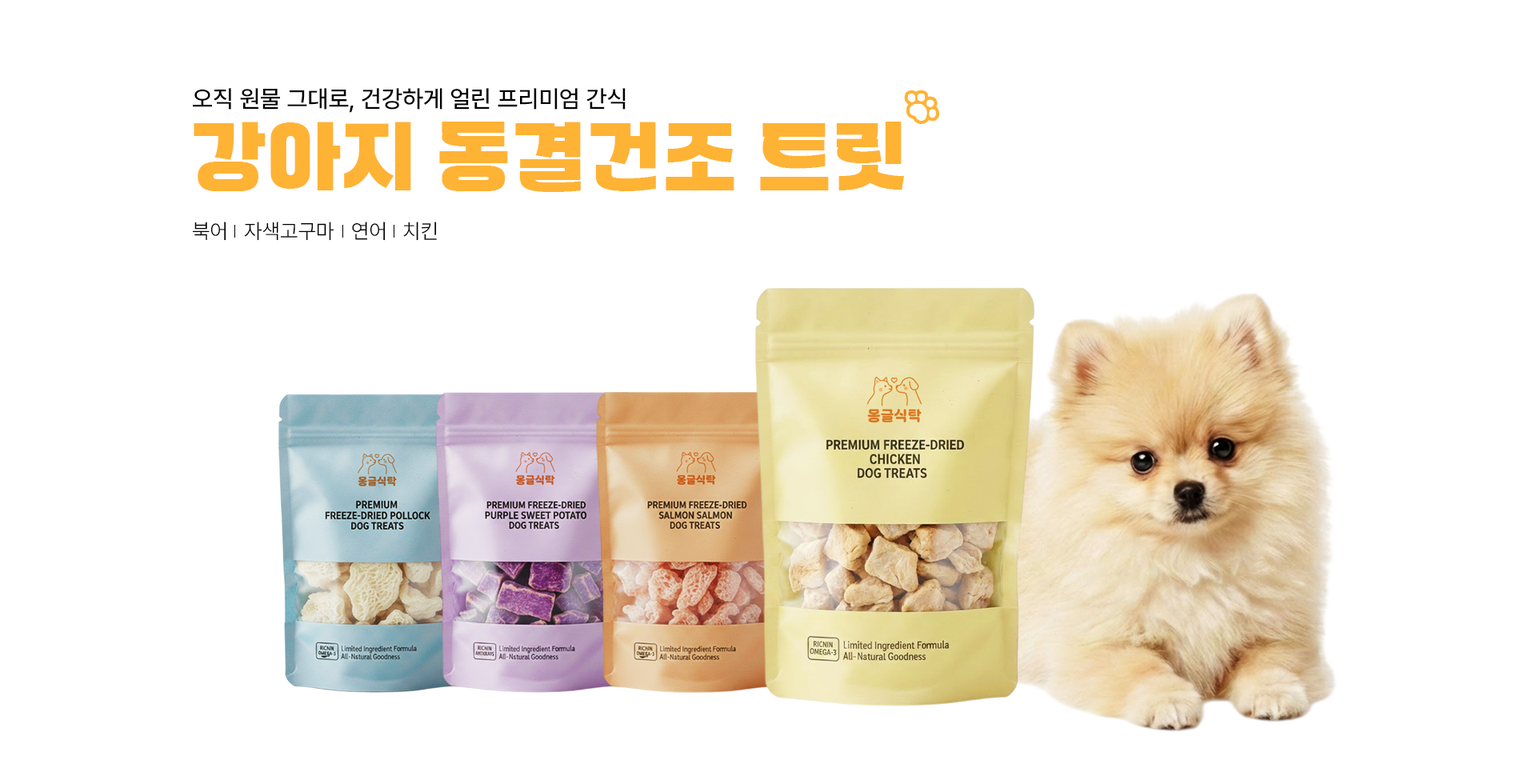
<style>
.page{position:relative;width:1536px;height:776px;background:#ffffff}
.page>*{position:absolute;margin:0}
.t1{font:24px "Pretendard-Medium";color:#000000;text-transform:uppercase}
.t2{font:80px "WAGURI-TTF";letter-spacing:0.005em;color:#ffb334;text-transform:uppercase}
.t3{font:20.8px "Pretendard-Light";color:#000000;text-transform:uppercase}
</style>
<div class="page">
<p class="t1" style="left:193px;top:88px;width:433px;height:25px">오직 원물 그대로, 건강하게 얼린 프리미엄 간식</p>
<p class="t2" style="left:194px;top:122px;width:710px;height:70px">강아지 동결건조 트릿</p>
<p class="t3" style="left:192px;top:222px;width:34px;height:19px">북어</p>
<p class="t3" style="left:244px;top:222px;width:90px;height:19px">자색고구마</p>
<p class="t3" style="left:352px;top:222px;width:34px;height:19px">연어</p>
<p class="t3" style="left:403px;top:222px;width:34px;height:19px">치킨</p>
</div>
